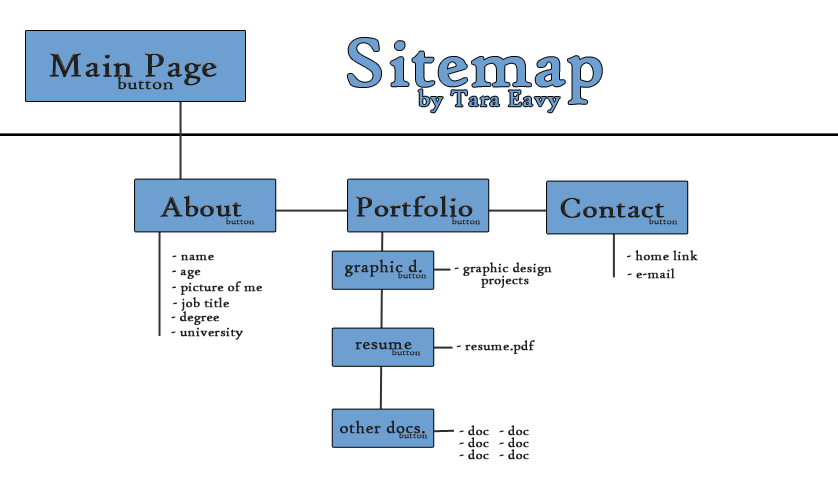
<style>
.page{position:relative;width:838px;height:497px;background:#ffffff}
.page>*{position:absolute;margin:0}
.t1{font:71.7px "HighTowerText-Reg";color:#6d9fd1;font-weight:bold}
.t2{font:35.9px "HighTowerText-Reg";color:#212121;font-weight:bold}
.t3{font:19.5px "HighTowerText-Reg";color:#212121;font-weight:bold}
.t4{font:23.9px "HighTowerText-Reg";color:#6d9fd1;font-weight:bold}
.t5{font:29.9px "HighTowerText-Reg";color:#212121;font-weight:bold}
.t6{font:10px "HighTowerText-Reg";color:#212121;font-weight:bold}
.t7{font:13.9px "HighTowerText-Reg";color:#212121;font-weight:bold}
.t8{font:17.9px "HighTowerText-Reg";color:#212121;font-weight:bold}
.t9{font:13.9px/12px "HighTowerText-Reg";color:#212121;font-weight:bold}
</style>
<div class="page">
<p class="t1" style="left:347px;top:38px;width:255px;height:66px">Sitemap</p>
<p class="t2" style="left:49px;top:52px;width:168px;height:34px">Main Page</p>
<p class="t3" style="left:117px;top:75px;width:57px;height:15px">button</p>
<p class="t4" style="left:418px;top:89px;width:142px;height:24px">by Tara Eavy</p>
<p class="t5" style="left:160px;top:195px;width:82px;height:22px">About</p>
<p class="t5" style="left:356px;top:195px;width:117px;height:22px">Portfolio</p>
<p class="t5" style="left:560px;top:197px;width:105px;height:21px">Contact</p>
<p class="t6" style="left:225px;top:217px;width:30px;height:8px">button</p>
<p class="t6" style="left:451px;top:217px;width:30px;height:8px">button</p>
<p class="t6" style="left:648px;top:217px;width:30px;height:8px">button</p>
<p class="t7" style="left:172px;top:254px;width:42px;height:7px">- name</p>
<p class="t7" style="left:627px;top:250px;width:71px;height:11px">- home link</p>
<p class="t7" style="left:172px;top:269px;width:29px;height:10px">- age</p>
<p class="t8" style="left:345px;top:259px;width:77px;height:18px">graphic d.</p>
<p class="t9" style="left:454px;top:262px;width:98px;height:26px;text-align:center">- graphic design <br>projects</p>
<p class="t7" style="left:627px;top:268px;width:48px;height:11px">- e-mail</p>
<p class="t7" style="left:172px;top:281px;width:90px;height:14px">- picture of me</p>
<p class="t6" style="left:397px;top:271px;width:30px;height:8px">button</p>
<p class="t7" style="left:173px;top:297px;width:56px;height:14px">- job title</p>
<p class="t7" style="left:171px;top:311px;width:48px;height:14px">- degree</p>
<p class="t7" style="left:171px;top:327px;width:72px;height:13px">- university</p>
<p class="t8" style="left:355px;top:341px;width:57px;height:9px">resume</p>
<p class="t7" style="left:457px;top:340px;width:78px;height:14px">- resume.pdf</p>
<p class="t6" style="left:391px;top:348px;width:30px;height:8px">button</p>
<p class="t8" style="left:340px;top:420px;width:85px;height:14px">other docs.</p>
<p class="t9" style="left:459px;top:425px;width:30px;height:35px;text-align:center">- doc<br>- doc<br>- doc</p>
<p class="t9" style="left:499px;top:425px;width:30px;height:35px;text-align:center">- doc<br>- doc<br>- doc</p>
<p class="t6" style="left:398px;top:431px;width:30px;height:8px">button</p>
</div>
